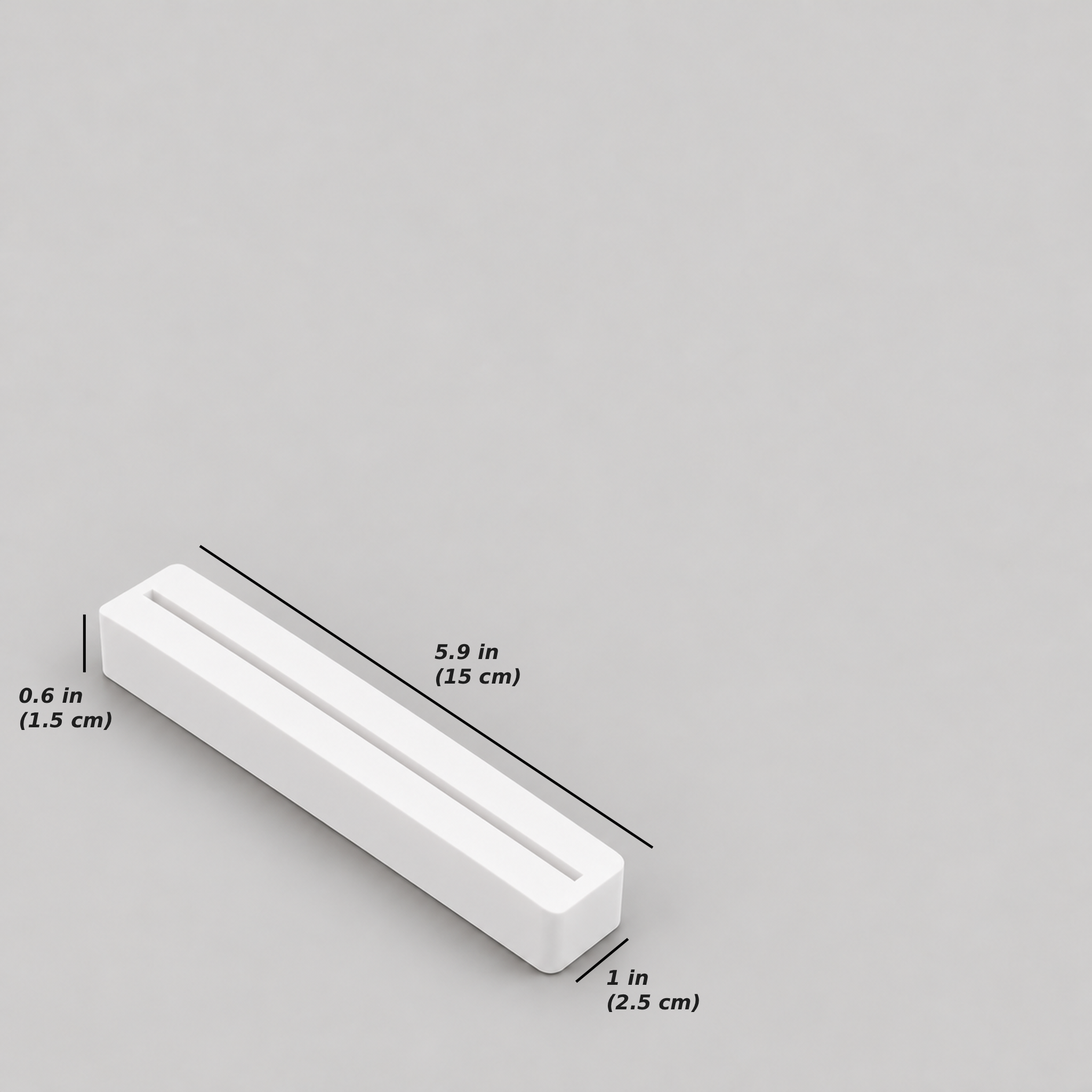
<style>
.page{position:relative;width:1092px;height:1092px}
.page>*{position:absolute;margin:0}
.t1{font:20.3px "DejaVuSans-BoldOblique";color:#1e1e1e}
</style>
<div class="page">
<p class="t1" style="left:435px;top:644px;width:85px;height:43px">5.9 in<br>(15 cm)</p>
<p class="t1" style="left:19px;top:687px;width:92px;height:43px">0.6 in<br>(1.5 cm)</p>
<p class="t1" style="left:607px;top:969px;width:92px;height:44px">1 in<br>(2.5 cm)</p>
</div>
